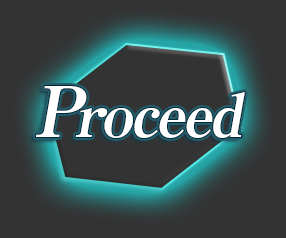
<style>
.page{position:relative;width:286px;height:238px;background:#333333}
.page>*{position:absolute;margin:0}
.t1{font:60px "RyuminPro-ExBold";letter-spacing:-0.06em;color:#ffffff;font-style:italic}
.t2{font:70px "RyuminPro-ExBold";letter-spacing:-0.06em;color:#ffffff;font-style:italic}
</style>
<div class="page">
<p class="t1" style="left:36px;top:86px;width:209px;height:52px"><span class="t2">P</span>roceed</p>
</div>
